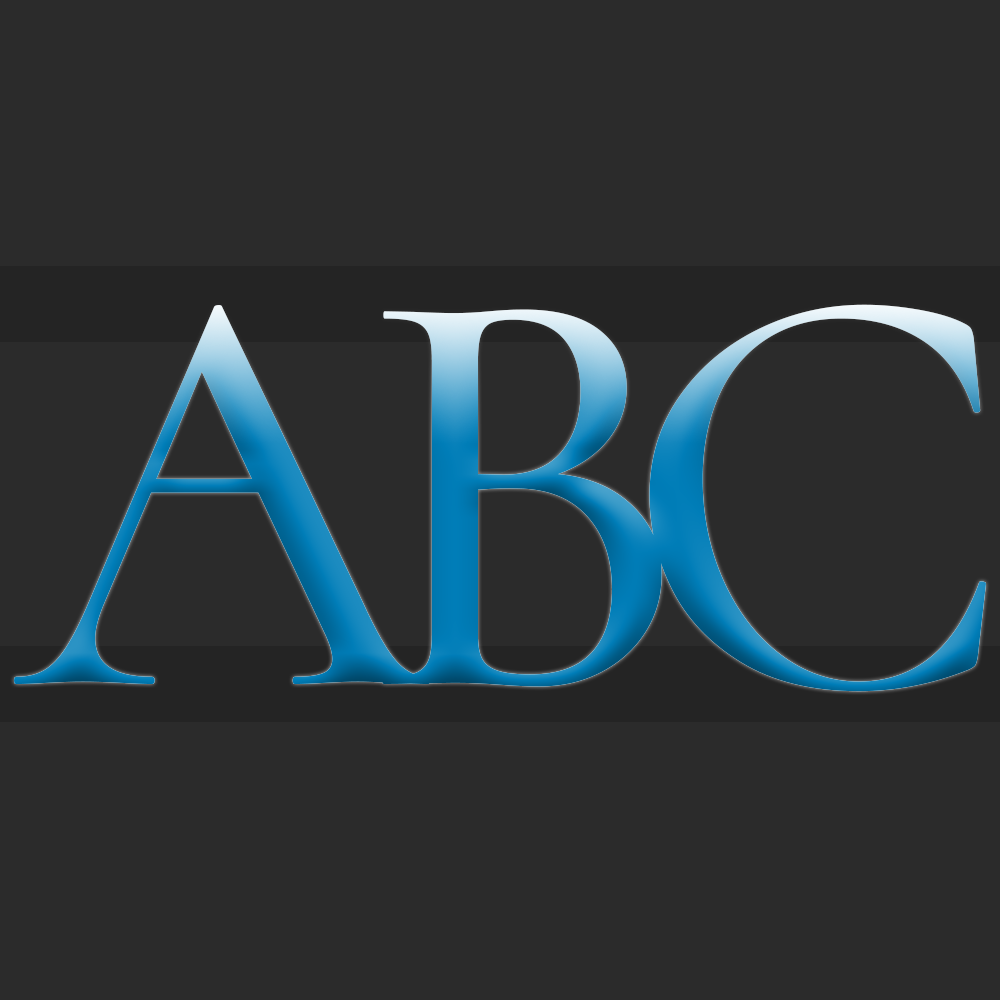
<style>
.page{position:relative;width:1000px;height:1000px;background:#2b2b2b}
.page>*{position:absolute;margin:0}
.t1{font:596.3px "CormorantUnicase-Medium";letter-spacing:-0.12em}
</style>
<div class="page">
<p class="t1" style="left:14px;top:304px;width:972px;height:388px">ABC</p>
</div>
